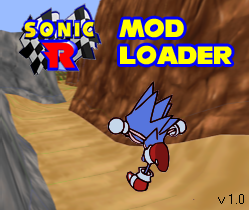
<style>
.page{position:relative;width:249px;height:210px}
.page>*{position:absolute;margin:0}
.t1{font:22.5px "NiseSegaSonic";color:#ffff00}
.t2{font:15px "MS Sans Serif";color:#000000}
</style>
<div class="page">
<p class="t1" style="left:119px;top:18px;width:113px;height:47px">Mod<br>Loader</p>
<p class="t2" style="left:218px;top:194px;width:26px;height:10px">v 1.0</p>
</div>
